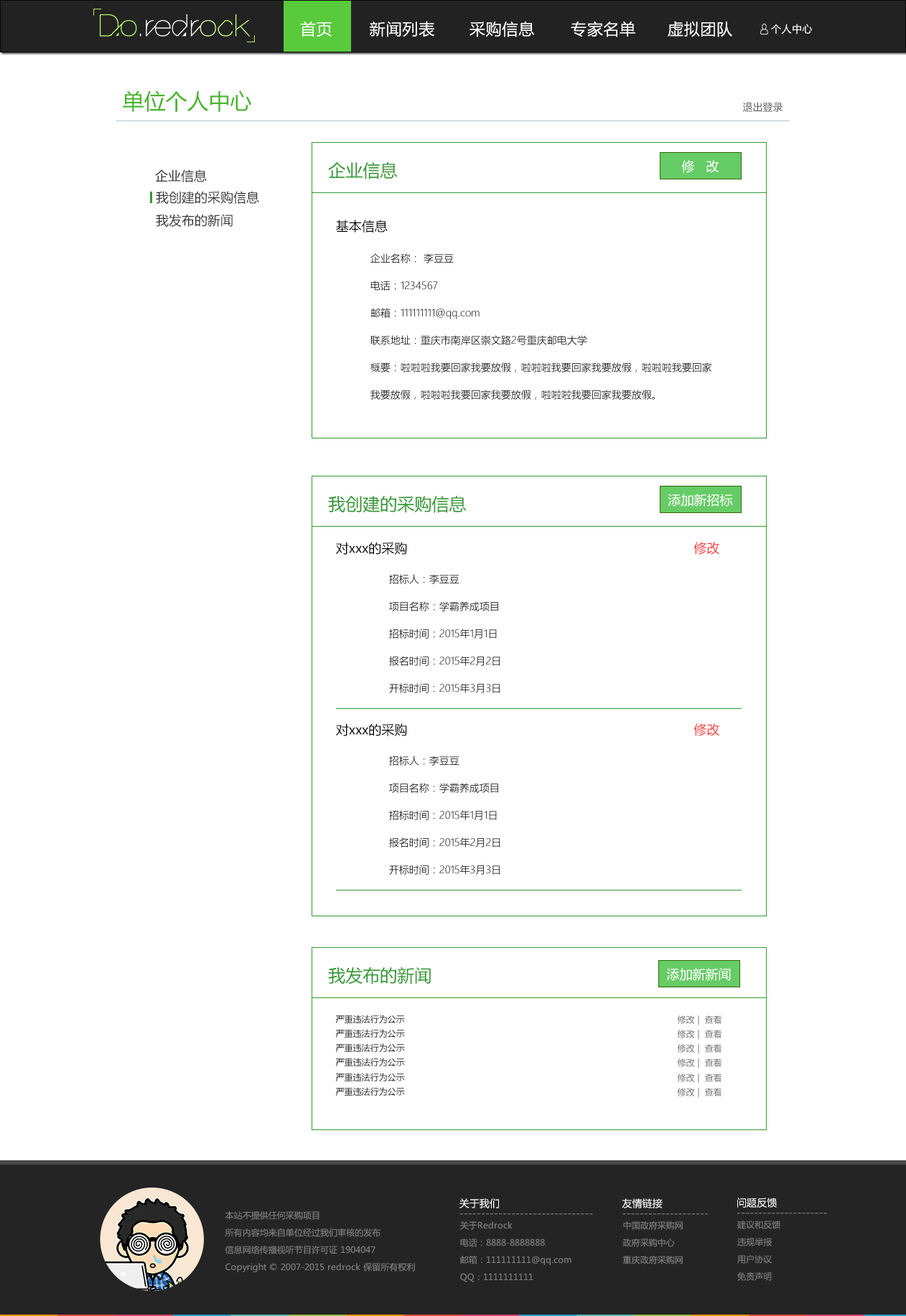
<style>
.page{position:relative;width:906px;height:1316px;background:#ffffff}
.page>*{position:absolute;margin:0}
.t1{font:15.8px "MicrosoftYaHei";letter-spacing:0.035em;color:#ffffff}
.t2{font:10px "MicrosoftYaHei";letter-spacing:0.035em;color:#ffffff}
.t3{font:21.5px "MicrosoftYaHei";color:#48b42c}
.t4{font:10px "MicrosoftYaHei";color:#5b5b5b}
.t5{font:17.2px "MicrosoftYaHei";color:#339933}
.t6{font:12.9px "MicrosoftYaHei";color:#ffffff}
.t7{font:12.9px "MicrosoftYaHei";color:#333333}
.t8{font:12.9px "MicrosoftYaHei";color:#000000}
.t9{font:10px/27.3px "MicrosoftYaHeiLight";color:#000000}
.t10{font:12.9px "MicrosoftYaHei";color:#ff3333}
.t11{font:8.6px "MicrosoftYaHei";color:#000000}
.t12{font:8.6px "MicrosoftYaHei";color:#666666}
.t13{font:10px "MicrosoftYaHei";color:#ffffff}
.t14{font:8.6px/17.2px "MicrosoftYaHei";color:#858585}
.t15{font:10px "MicrosoftYaHei";color:#858585}
</style>
<div class="page">
<p class="t1" style="left:300px;top:21px;width:32px;height:16px">首页</p>
<p class="t1" style="left:370px;top:21px;width:64px;height:16px">新闻列表</p>
<p class="t1" style="left:469px;top:21px;width:66px;height:16px">采购信息</p>
<p class="t1" style="left:571px;top:21px;width:64px;height:16px">专家名单</p>
<p class="t1" style="left:668px;top:21px;width:64px;height:16px">虚拟团队</p>
<p class="t2" style="left:771px;top:24px;width:42px;height:10px">个人中心</p>
<p class="t3" style="left:123px;top:90px;width:129px;height:22px">单位个人中心</p>
<p class="t4" style="left:742px;top:102px;width:40px;height:10px">退出登录</p>
<p class="t5" style="left:328px;top:161px;width:70px;height:18px">企业信息</p>
<p class="t6" style="left:681px;top:160px;width:38px;height:13px">修   改</p>
<p class="t7" style="left:155px;top:169px;width:52px;height:13px">企业信息</p>
<p class="t7" style="left:156px;top:191px;width:103px;height:13px">我创建的采购信息</p>
<p class="t7" style="left:156px;top:214px;width:77px;height:13px">我发布的新闻</p>
<p class="t8" style="left:336px;top:220px;width:52px;height:13px">基本信息</p>
<p class="t9" style="left:370px;top:253px;width:341px;height:147px">企业名称： 李豆豆<br>电话：1234567<br>邮箱：111111111@qq.com<br>联系地址：重庆市南岸区崇文路2号重庆邮电大学<br>概要：啦啦啦我要回家我要放假，啦啦啦我要回家我要放假，啦啦啦我要回家<br>我要放假，啦啦啦我要回家我要放假，啦啦啦我要回家我要放假。</p>
<p class="t5" style="left:328px;top:495px;width:139px;height:18px">我创建的采购信息</p>
<p class="t6" style="left:668px;top:494px;width:65px;height:13px">添加新招标</p>
<p class="t8" style="left:336px;top:542px;width:71px;height:13px">对xxx的采购</p>
<p class="t10" style="left:693px;top:542px;width:27px;height:13px">修改</p>
<p class="t9" style="left:389px;top:574px;width:111px;height:119px">招标人：李豆豆<br>项目名称：学霸养成项目<br>招标时间：2015年1月1日<br>报名时间：2015年2月2日<br>开标时间：2015年3月3日</p>
<p class="t8" style="left:336px;top:724px;width:71px;height:12px">对xxx的采购</p>
<p class="t10" style="left:693px;top:724px;width:27px;height:12px">修改</p>
<p class="t9" style="left:389px;top:756px;width:111px;height:119px">招标人：李豆豆<br>项目名称：学霸养成项目<br>招标时间：2015年1月1日<br>报名时间：2015年2月2日<br>开标时间：2015年3月3日</p>
<p class="t5" style="left:328px;top:967px;width:103px;height:18px">我发布的新闻</p>
<p class="t6" style="left:666px;top:968px;width:65px;height:13px">添加新新闻</p>
<p class="t11" style="left:335px;top:1015px;width:70px;height:9px">严重违法行为公示</p>
<p class="t12" style="left:677px;top:1016px;width:45px;height:10px">修改 |  查看</p>
<p class="t11" style="left:335px;top:1029px;width:70px;height:10px">严重违法行为公示</p>
<p class="t12" style="left:677px;top:1030px;width:45px;height:10px">修改 |  查看</p>
<p class="t11" style="left:335px;top:1044px;width:70px;height:9px">严重违法行为公示</p>
<p class="t12" style="left:677px;top:1044px;width:45px;height:10px">修改 |  查看</p>
<p class="t11" style="left:335px;top:1058px;width:70px;height:9px">严重违法行为公示</p>
<p class="t12" style="left:677px;top:1059px;width:45px;height:10px">修改 |  查看</p>
<p class="t11" style="left:335px;top:1073px;width:70px;height:9px">严重违法行为公示</p>
<p class="t12" style="left:677px;top:1074px;width:45px;height:10px">修改 |  查看</p>
<p class="t11" style="left:335px;top:1087px;width:70px;height:10px">严重违法行为公示</p>
<p class="t12" style="left:677px;top:1088px;width:45px;height:10px">修改 |  查看</p>
<p class="t13" style="left:459px;top:1199px;width:40px;height:10px">关于我们</p>
<p class="t13" style="left:622px;top:1199px;width:41px;height:10px">友情链接</p>
<p class="t13" style="left:737px;top:1198px;width:40px;height:10px">问题反馈</p>
<p class="t14" style="left:225px;top:1212px;width:190px;height:61px">本站不提供任何采购项目<br>所有内容均来自单位经过我们审核的发布<br>信息网络传播视听节目许可证 1904047<br>Copyright © 2007-2015 redrock 保留所有权利</p>
<p class="t15" style="left:459px;top:1214px;width:134px;height:1px">-------------------------------</p>
<p class="t15" style="left:622px;top:1214px;width:86px;height:1px">--------------------</p>
<p class="t15" style="left:737px;top:1213px;width:90px;height:1px">---------------------</p>
<p class="t14" style="left:460px;top:1222px;width:111px;height:61px">关于Redrock<br>电话：8888-8888888<br>邮箱：111111111@qq.com<br>QQ：1111111111</p>
<p class="t14" style="left:622px;top:1222px;width:61px;height:43px">中国政府采购网<br>政府采购中心<br>重庆政府采购网</p>
<p class="t14" style="left:737px;top:1221px;width:43px;height:60px">建议和反馈<br>违规举报<br>用户协议<br>免责声明</p>
</div>
